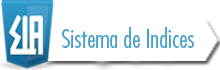
<style>
.page{position:relative;width:220px;height:70px;background:#ffffff}
.page>*{position:absolute;margin:0}
.t1{font:25px "FuturaStd-CondensedLight";color:#47a1cb}
</style>
<div class="page">
<p class="t1" style="left:62px;top:27px;width:132px;height:21px">Sistema de Indices</p>
</div>
